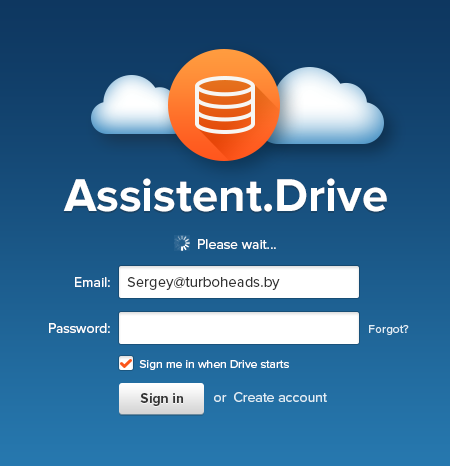
<style>
.page{position:relative;width:450px;height:466px}
.page>*{position:absolute;margin:0}
.t1{font:47.5px "ProximaNova-Bold";color:#ffffff}
.t2{font:14px "ProximaNova-Regular";color:#ffffff}
.t3{font:15px "ProximaNova-Regular";color:#333333}
.t4{font:12px "ProximaNova-Regular";color:#dfedf5}
.t5{font:12px "ProximaNova-Regular";color:#ffffff}
.t6{font:14px "ProximaNova-Bold";color:#333333}
.t7{font:14px "ProximaNova-Regular";color:#dfedf5}
</style>
<div class="page">
<p class="t1" style="left:63px;top:178px;width:324px;height:34px">Assistent.Drive</p>
<p class="t2" style="left:198px;top:239px;width:78px;height:10px">Please wait...</p>
<p class="t2" style="left:75px;top:277px;width:35px;height:10px">Email:</p>
<p class="t3" style="left:127px;top:277px;width:153px;height:13px">Sergey@turboheads.by</p>
<p class="t2" style="left:49px;top:323px;width:61px;height:10px">Password:</p>
<p class="t4" style="left:369px;top:325px;width:40px;height:10px">Forgot?</p>
<p class="t5" style="left:139px;top:360px;width:150px;height:10px">Sign me in when Drive starts</p>
<p class="t6" style="left:140px;top:393px;width:43px;height:13px">Sign in</p>
<p class="t7" style="left:214px;top:392px;width:113px;height:10px">or  Create account</p>
</div>
